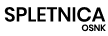
<style>
.page{position:relative;width:108px;height:36px;background:#ffffff}
.page>*{position:absolute;margin:0}
.t1{font:20px "Poppins-Medium";color:#000000}
.t2{font:9px "Poppins-Medium";color:#000000}
</style>
<div class="page">
<p class="t1" style="left:4px;top:7px;width:102px;height:15px">SPLETNICA</p>
<p class="t2" style="left:81px;top:24px;width:25px;height:8px">OSNK</p>
</div>
